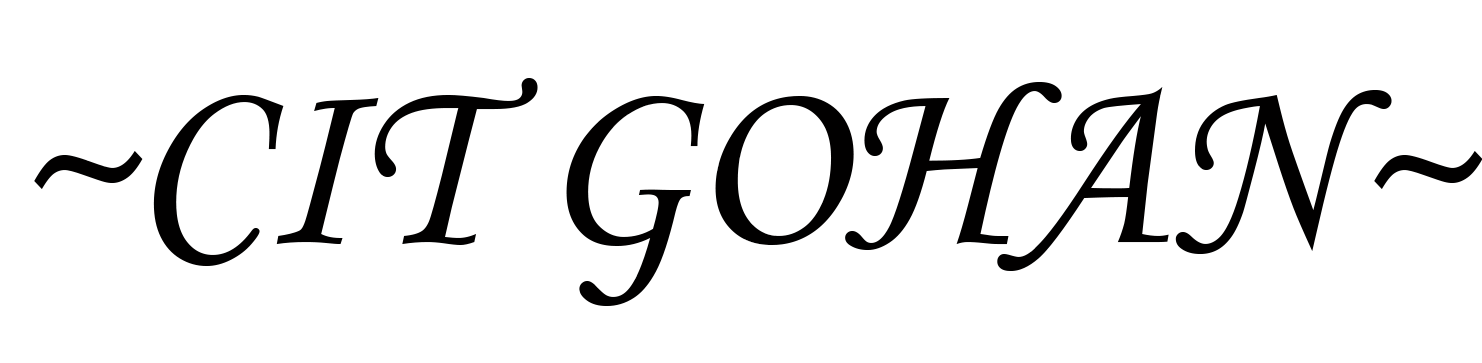
<style>
.page{position:relative;width:1482px;height:363px;background:#ffffff}
.page>*{position:absolute;margin:0}
.t1{font:250px "MonotypeCorsiva";color:#010000}
</style>
<div class="page">
<p class="t1" style="left:34px;top:78px;width:1449px;height:228px">~CIT GOHAN~</p>
</div>
